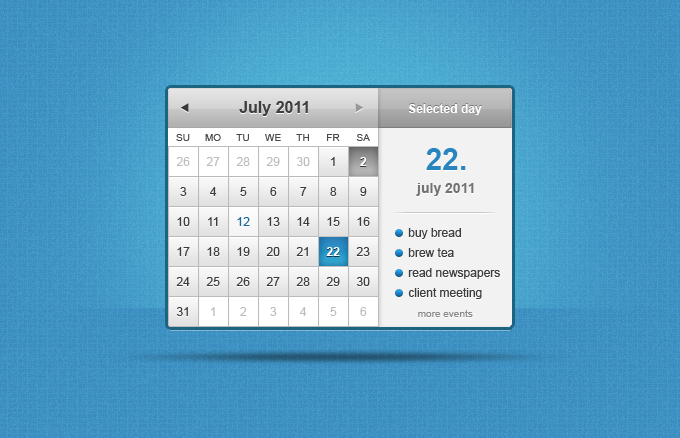
<style>
.page{position:relative;width:680px;height:438px}
.page>*{position:absolute;margin:0}
.t1{font:16px "Arial-BoldMT";color:#3e3e3e}
.t2{font:12px "Arial-BoldMT";color:#ffffff}
.t3{font:10px "ArialMT";color:#494949}
.t4{font:30px "Arial-BoldMT";color:#2985be}
.t5{font:12px "ArialMT";color:#bdbdbd}
.t6{font:12px "ArialMT";color:#3d3d3d}
.t7{font:14px "Arial-BoldMT";color:#737272}
.t8{font:12px "ArialMT";color:#1b6b9d}
.t9{font:12px/20px "ArialMT";color:#3d3d3d}
.t10{font:10px "ArialMT";color:#888888}
</style>
<div class="page">
<p class="t1" style="left:239px;top:101px;width:69px;height:15px">July 2011</p>
<p class="t2" style="left:408px;top:104px;width:74px;height:11px">Selected day</p>
<p class="t3" style="left:176px;top:134px;width:14px;height:7px">SU</p>
<p class="t3" style="left:205px;top:134px;width:16px;height:7px">MO</p>
<p class="t3" style="left:236px;top:134px;width:13px;height:7px">TU</p>
<p class="t3" style="left:265px;top:134px;width:16px;height:7px">WE</p>
<p class="t3" style="left:296px;top:134px;width:13px;height:7px">TH</p>
<p class="t3" style="left:327px;top:134px;width:13px;height:7px">FR</p>
<p class="t3" style="left:356px;top:134px;width:14px;height:7px">SA</p>
<p class="t4" style="left:426px;top:148px;width:40px;height:22px">22.</p>
<p class="t5" style="left:176px;top:157px;width:14px;height:9px">26</p>
<p class="t5" style="left:206px;top:157px;width:14px;height:9px">27</p>
<p class="t5" style="left:236px;top:157px;width:14px;height:9px">28</p>
<p class="t5" style="left:266px;top:157px;width:14px;height:9px">29</p>
<p class="t5" style="left:296px;top:157px;width:14px;height:9px">30</p>
<p class="t6" style="left:331px;top:157px;width:4px;height:9px">1</p>
<p class="t2" style="left:360px;top:157px;width:7px;height:9px">2</p>
<p class="t7" style="left:416px;top:183px;width:58px;height:13px">july 2011</p>
<p class="t6" style="left:180px;top:187px;width:7px;height:9px">3</p>
<p class="t6" style="left:210px;top:187px;width:7px;height:9px">4</p>
<p class="t6" style="left:240px;top:187px;width:7px;height:9px">5</p>
<p class="t6" style="left:270px;top:187px;width:7px;height:9px">6</p>
<p class="t6" style="left:300px;top:187px;width:7px;height:9px">7</p>
<p class="t6" style="left:330px;top:187px;width:7px;height:9px">8</p>
<p class="t6" style="left:360px;top:187px;width:7px;height:9px">9</p>
<p class="t6" style="left:177px;top:217px;width:13px;height:9px">10</p>
<p class="t6" style="left:208px;top:217px;width:10px;height:9px">11</p>
<p class="t8" style="left:237px;top:217px;width:13px;height:9px">12</p>
<p class="t6" style="left:267px;top:217px;width:13px;height:9px">13</p>
<p class="t6" style="left:297px;top:217px;width:13px;height:9px">14</p>
<p class="t6" style="left:327px;top:217px;width:13px;height:9px">15</p>
<p class="t6" style="left:357px;top:217px;width:13px;height:9px">16</p>
<p class="t9" style="left:408px;top:228px;width:92px;height:71px">buy bread<br>brew tea<br>read newspapers<br>client meeting</p>
<p class="t6" style="left:177px;top:247px;width:13px;height:9px">17</p>
<p class="t6" style="left:207px;top:247px;width:13px;height:9px">18</p>
<p class="t6" style="left:237px;top:247px;width:13px;height:9px">19</p>
<p class="t6" style="left:266px;top:247px;width:14px;height:9px">20</p>
<p class="t6" style="left:296px;top:247px;width:12px;height:9px">21</p>
<p class="t2" style="left:326px;top:247px;width:14px;height:9px">22</p>
<p class="t6" style="left:356px;top:247px;width:14px;height:9px">23</p>
<p class="t6" style="left:176px;top:277px;width:14px;height:9px">24</p>
<p class="t6" style="left:206px;top:277px;width:14px;height:9px">25</p>
<p class="t6" style="left:236px;top:277px;width:14px;height:9px">26</p>
<p class="t6" style="left:266px;top:277px;width:14px;height:9px">27</p>
<p class="t6" style="left:296px;top:277px;width:14px;height:9px">28</p>
<p class="t6" style="left:326px;top:277px;width:14px;height:9px">29</p>
<p class="t6" style="left:356px;top:277px;width:14px;height:9px">30</p>
<p class="t6" style="left:176px;top:307px;width:12px;height:9px">31</p>
<p class="t5" style="left:211px;top:307px;width:4px;height:9px">1</p>
<p class="t5" style="left:240px;top:307px;width:7px;height:9px">2</p>
<p class="t5" style="left:270px;top:307px;width:7px;height:9px">3</p>
<p class="t5" style="left:300px;top:307px;width:7px;height:9px">4</p>
<p class="t5" style="left:330px;top:307px;width:7px;height:9px">5</p>
<p class="t5" style="left:360px;top:307px;width:7px;height:9px">6</p>
<p class="t10" style="left:418px;top:310px;width:55px;height:7px">more events</p>
</div>
